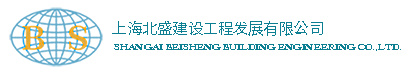
<style>
.page{position:relative;width:410px;height:72px;background:#ffffff}
.page>*{position:absolute;margin:0}
.t1{font:15.5px "SourceHanSansCN-Medium";color:#0b7e92}
.t2{font:7.6px "Chopin-Bold";color:#0b7e92}
</style>
<div class="page">
<p class="t1" style="left:112px;top:21px;width:211px;height:15px">上海北盛建设工程发展有限公司</p>
<p class="t2" style="left:114px;top:44px;width:287px;height:7px">SHANGAI BEISHENG BUILDING ENGINEERING CO.,LTD.</p>
</div>
